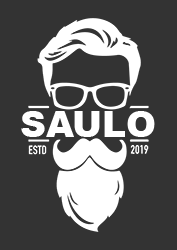
<style>
.page{position:relative;width:177px;height:250px;background:#333333}
.page>*{position:absolute;margin:0}
.t1{font:36px "Arial-Black";color:#ffffff}
</style>
<div class="page">
<p class="t1" style="left:21px;top:111px;width:134px;height:26px">SAULO</p>
</div>
